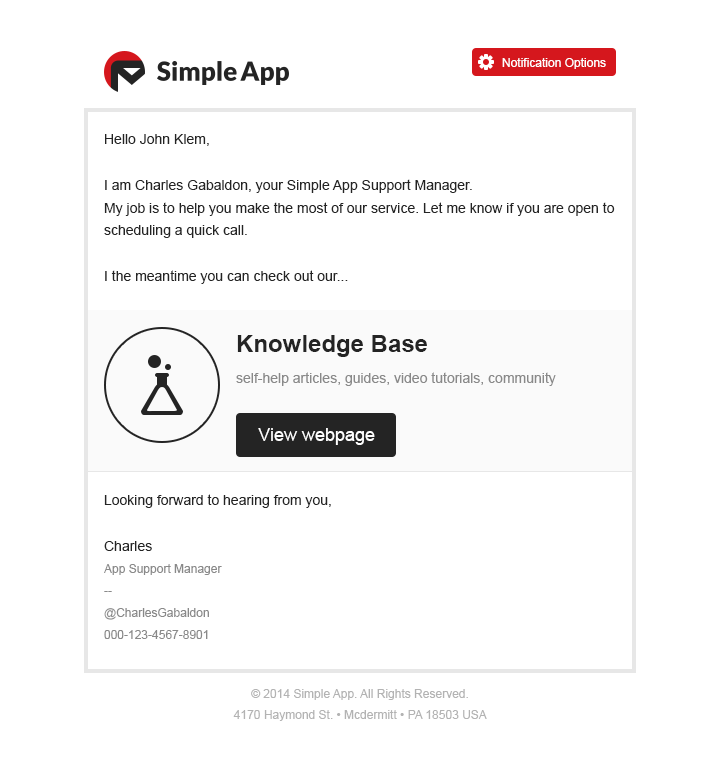
<style>
.page{position:relative;width:720px;height:768px;background:#ffffff}
.page>*{position:absolute;margin:0}
.t1{font:12px "ArialMT";color:#ffffff}
.t2{font:14px/22px "ArialMT";color:#242424}
.t3{font:24px "Arial-BoldMT";color:#242424}
.t4{font:14px "ArialMT";color:#898989}
.t5{font:18px "ArialMT";color:#ffffff}
.t6{font:12px/22px "ArialMT";color:#898989}
.t7{font:12px/21px "ArialMT";color:#b3b3b3}
</style>
<div class="page">
<p class="t1" style="left:502px;top:58px;width:104px;height:11px">Notification Options</p>
<p class="t2" style="left:104px;top:134px;width:511px;height:150px">Hello John Klem,<br><br>I am Charles Gabaldon, your Simple App Support Manager. <br>My job is to help you make the most of our service. Let me know if you are open to scheduling a quick call.<br><br>I the meantime you can check out our...</p>
<p class="t3" style="left:237px;top:335px;width:190px;height:22px">Knowledge Base</p>
<p class="t4" style="left:236px;top:372px;width:320px;height:14px">self-help articles, guides, video tutorials, community</p>
<p class="t5" style="left:258px;top:428px;width:117px;height:17px">View webpage</p>
<p class="t2" style="left:104px;top:494px;width:227px;height:57px">Looking forward to hearing from you,<br><br>Charles</p>
<p class="t6" style="left:104px;top:564px;width:118px;height:75px">App Support Manager<br>--<br>@CharlesGabaldon<br>000-123-4567-8901</p>
<p class="t7" style="left:233px;top:689px;width:254px;height:32px;text-align:center">© 2014 Simple App. All Rights Reserved.<br>4170 Haymond St. • Mcdermitt • PA 18503 USA</p>
</div>
